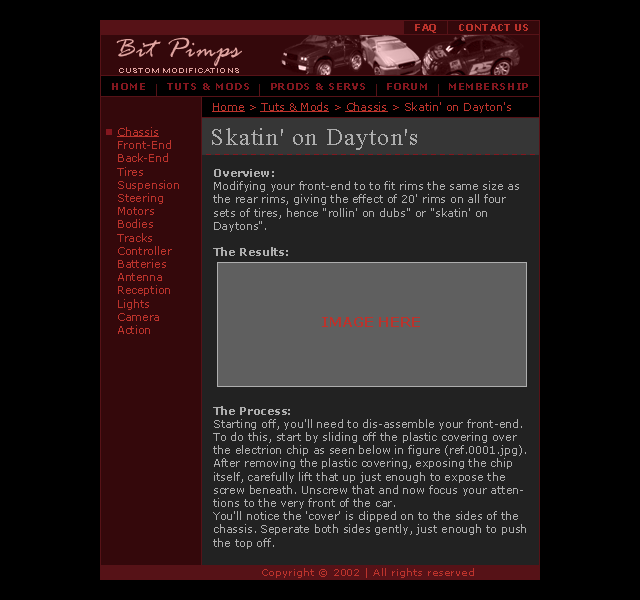
<style>
.page{position:relative;width:640px;height:600px;background:#000000}
.page>*{position:absolute;margin:0}
.t1{font:10px "Verdana-Bold";color:#bc332c}
.t2{font:30px "RageItalic";letter-spacing:0.05em;color:#e1a5a1}
.t3{font:7.2px "ArialMT";letter-spacing:0.05em;color:#e1a5a1;scale:1.25 1}
.t4{font:10px "Verdana-Bold";letter-spacing:0.05em;color:#84171f}
.t5{font:11px "Verdana";color:#bc332c}
.t6{font:11px "Verdana";color:#bc332c;text-decoration:underline}
.t7{font:24px "TimesNewRomanPSMT";letter-spacing:0.05em;color:#aeaeae}
.t8{font:11px "Verdana";color:#aeaeae}
.t9{font:11px "Verdana-Bold";color:#aeaeae}
.t10{font:14px "Verdana-Bold";color:#bc332c}
.t11{font:10px "Verdana";letter-spacing:0.05em;color:#bc332c}
</style>
<div class="page">
<p class="t1" style="left:415px;top:24px;width:21px;height:9px">FAQ</p>
<p class="t1" style="left:459px;top:24px;width:69px;height:7px">CONTACT US</p>
<p class="t2" style="left:116px;top:37px;width:126px;height:30px">Bit Pimps</p>
<p class="t3" style="left:119px;top:68px;width:120px;height:5px">CUSTOM MODIFICATIONS</p>
<p class="t4" style="left:112px;top:83px;width:33px;height:7px">HOME</p>
<p class="t4" style="left:167px;top:83px;width:82px;height:7px">TUTS &amp; MODS</p>
<p class="t4" style="left:271px;top:83px;width:94px;height:7px">PRODS &amp; SERVS</p>
<p class="t4" style="left:387px;top:83px;width:40px;height:7px">FORUM</p>
<p class="t4" style="left:449px;top:83px;width:79px;height:7px">MEMBERSHIP</p>
<p class="t5" style="left:212px;top:102px;width:299px;height:11px"><span class="t6">Home</span> &gt; <span class="t6">Tuts &amp; Mods</span> &gt; <span class="t6">Chassis</span> &gt; Skatin' on Dayton's</p>
<p class="t5" style="left:117px;top:127px;width:62px;height:207px"><span class="t6">Chassis<br></span>Front-End<br>Back-End<br>Tires<br>Suspension<br>Steering<br>Motors<br>Bodies<br>Tracks<br>Controller<br>Batteries<br>Antenna<br>Reception<br>Lights<br>Camera<br>Action</p>
<p class="t7" style="left:212px;top:128px;width:205px;height:22px">Skatin' on Dayton's</p>
<p class="t8" style="left:213px;top:169px;width:313px;height:380px"><span class="t9">Overview:<br></span>Modifying your front-end to to fit rims the same size as<br>the rear rims, giving the effect of 20' rims on all four<br>sets of tires, hence "rollin' on dubs" or "skatin' on<br>Daytons".<br><br><span class="t9">The Results:<br><br><br><br><br><br><br><br><br><br><br><br>The Process:<br></span>Starting off, you'll need to dis-assemble your front-end.<br>To do this, start by sliding off the plastic covering over<br>the electrion chip as seen below in figure (ref.0001.jpg).<br>After removing the plastic covering, exposing the chip<br>itself, carefully lift that up just enough to expose the<br>screw beneath. Unscrew that and now focus your atten-<br>tions to the very front of the car.<br>You'll notice the 'cover' is clipped on to the sides of the<br>chassis. Seperate both sides gently, just enough to push<br>the top off.</p>
<p class="t10" style="left:322px;top:317px;width:98px;height:10px">IMAGE HERE</p>
<p class="t11" style="left:262px;top:568px;width:212px;height:10px">Copyright © 2002 | All rights reserved</p>
</div>
